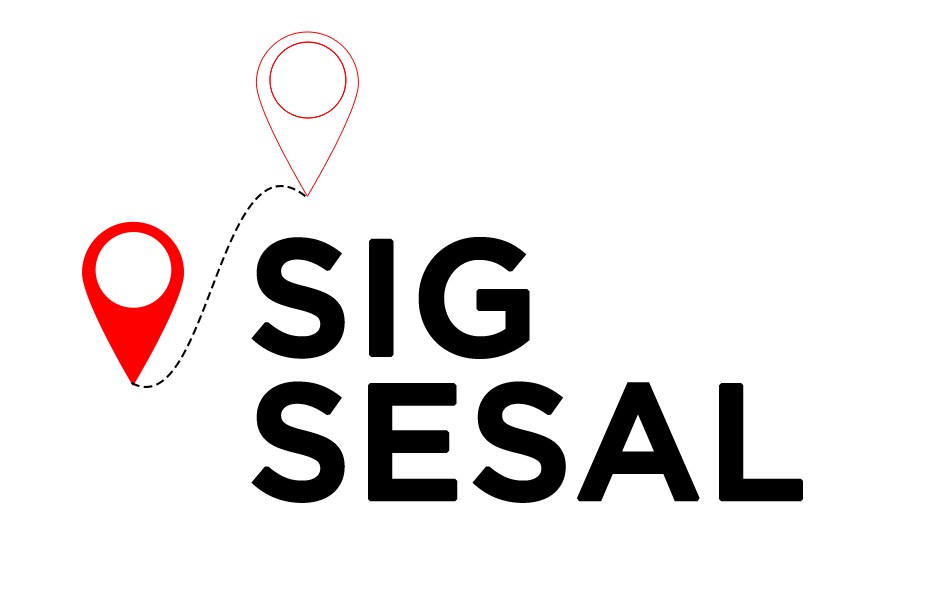
<style>
.page{position:relative;width:945px;height:591px;background:#ffffff}
.page>*{position:absolute;margin:0}
.t1{font:162.3px/144.2px "Gotham-Medium";color:#000000;font-weight:bold}
</style>
<div class="page">
<p class="t1" style="left:251px;top:237px;width:552px;height:266px">SIG<br>SESAL</p>
</div>
